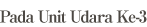
<style>
.page{position:relative;width:147px;height:27px;background:#ffffff}
.page>*{position:absolute;margin:0}
.t1{font:16.5px "RyuminPro-ExBold";letter-spacing:-0.08em;color:#4c4843}
</style>
<div class="page">
<p class="t1" style="left:0px;top:10px;width:147px;height:13px">Pada Unit Udara Ke-3</p>
</div>
